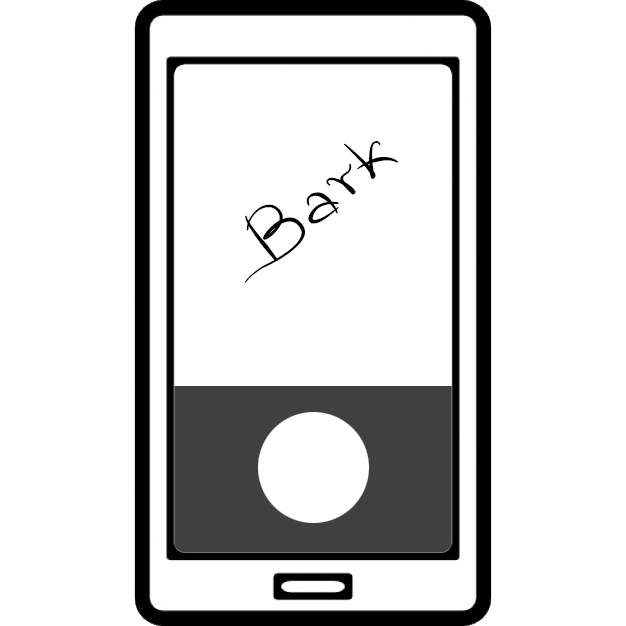
<style>
.page{position:relative;width:626px;height:626px;background:#ffffff}
.page>*{position:absolute;margin:0}
.t1{font:59px "WildScript";letter-spacing:0.06em;color:#000000;scale:1.22 1}
</style>
<div class="page">
<p class="t1" style="left:244px;top:141px;width:155px;height:142px;rotate:-41deg">Bark</p>
</div>
